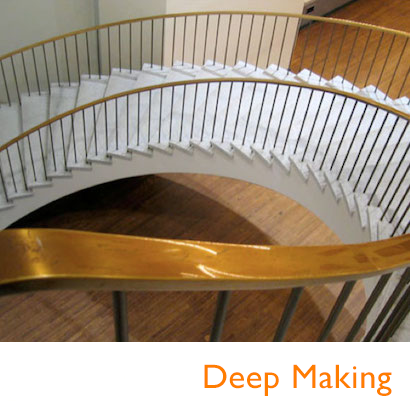
<style>
.page{position:relative;width:410px;height:410px}
.page>*{position:absolute;margin:0}
.t1{font:34.3px "GillSans";letter-spacing:0.02em;color:#ff7d00}
</style>
<div class="page">
<p class="t1" style="left:204px;top:364px;width:188px;height:32px">Deep Making</p>
</div>
